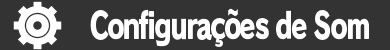
<style>
.page{position:relative;width:390px;height:50px;background:#333333}
.page>*{position:absolute;margin:0}
.t1{font:36px "RodinPro-EB";letter-spacing:-0.067em;color:#ffffff;scale:0.73 1}
</style>
<div class="page">
<p class="t1" style="left:90px;top:8px;width:279px;height:39px">Configurações de Som</p>
</div>
